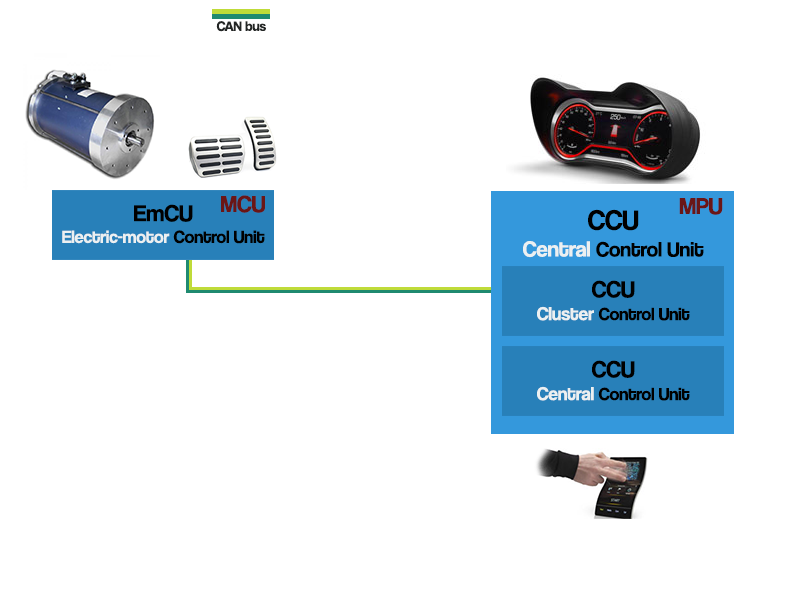
<style>
.page{position:relative;width:800px;height:600px;background:#ffffff}
.page>*{position:absolute;margin:0}
.t1{font:14px "CoolveticaRg-Regular";color:#232625}
.t2{font:24px "CoolveticaRg-Regular";color:#6a1616}
.t3{font:18px "CoolveticaRg-Regular";color:#ecf0f1}
.t4{font:24px "CoolveticaRg-Regular";color:#000000}
.t5{font:18px "CoolveticaRg-Regular";color:#000000}
.t6{font:21.3px "CoolveticaRg-Regular";color:#000000}
.t7{font:28.4px "CoolveticaRg-Regular";color:#000000}
.t8{font:22.5px "CoolveticaRg-Regular";color:#ecf0f1}
.t9{font:19px "CoolveticaRg-Regular";color:#ecf0f1}
</style>
<div class="page">
<p class="t1" style="left:216px;top:21px;width:50px;height:11px">CAN bus</p>
<p class="t2" style="left:221px;top:195px;width:44px;height:18px">MCU</p>
<p class="t2" style="left:679px;top:198px;width:44px;height:17px">MPU</p>
<p class="t3" style="left:62px;top:204px;width:203px;height:40px;text-align:center"><span class="t4">EmCU<br></span>Electric-motor<span class="t5"> Control Unit</span></p>
<p class="t6" style="left:523px;top:209px;width:181px;height:49px;text-align:center"><span class="t7">CCU<br></span><span class="t8">Central </span>Control Unit</p>
<p class="t5" style="left:537px;top:280px;width:153px;height:41px;text-align:center"><span class="t4">CCU<br></span><span class="t9">Cluster </span>Control Unit</p>
<p class="t5" style="left:537px;top:360px;width:153px;height:41px;text-align:center"><span class="t4">CCU<br></span><span class="t9">Central </span>Control Unit</p>
</div>
